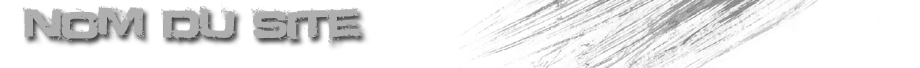
<style>
.page{position:relative;width:920px;height:68px;background:#ffffff}
.page>*{position:absolute;margin:0}
.t1{font:38.4px "Defused-ExtendedBold";color:#b0afaf}
</style>
<div class="page">
<p class="t1" style="left:22px;top:3px;width:343px;height:41px">Nom du site</p>
</div>
